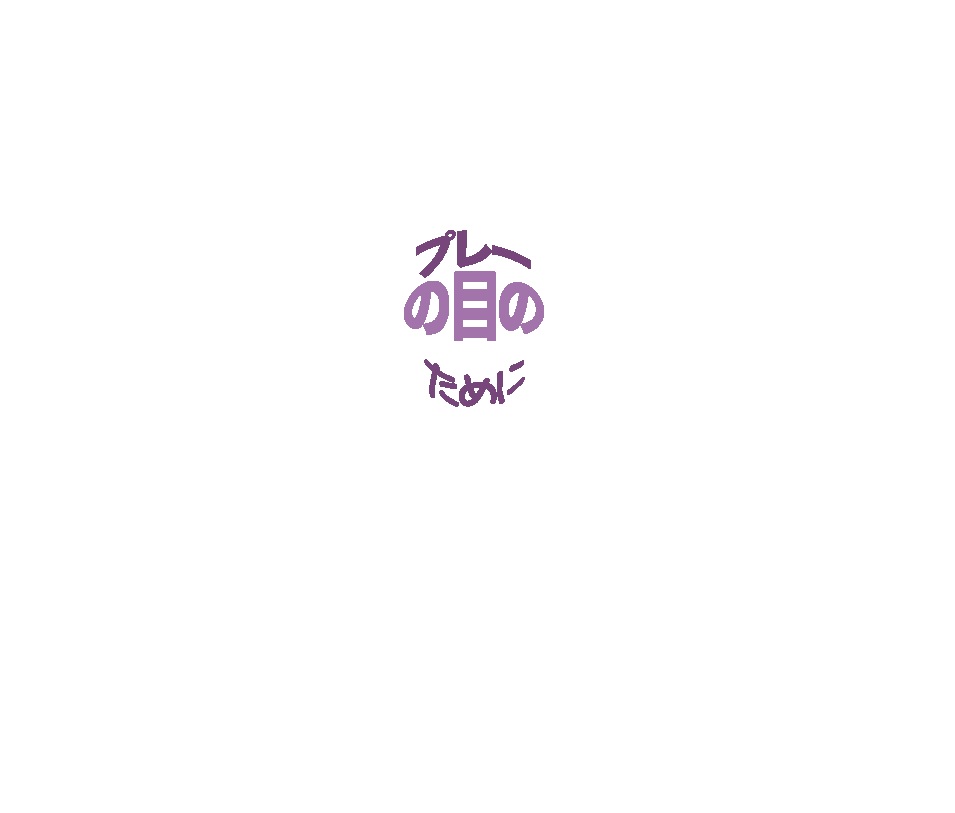
<style>
.page{position:relative;width:955px;height:813px;background:#ffffff}
.page>*{position:absolute;margin:0}
.t1{font:41.7px "HiraKakuStdN-W8";letter-spacing:-0.075em;color:#77477b}
.t2{font:41.7px "nagurigaki-P";letter-spacing:-0.075em;color:#77477b}
</style>
<div class="page">
<p class="t1" style="left:416px;top:230px;width:115px;height:48px">プレー</p>
<p class="t2" style="left:424px;top:359px;width:101px;height:48px">ために</p>
</div>
